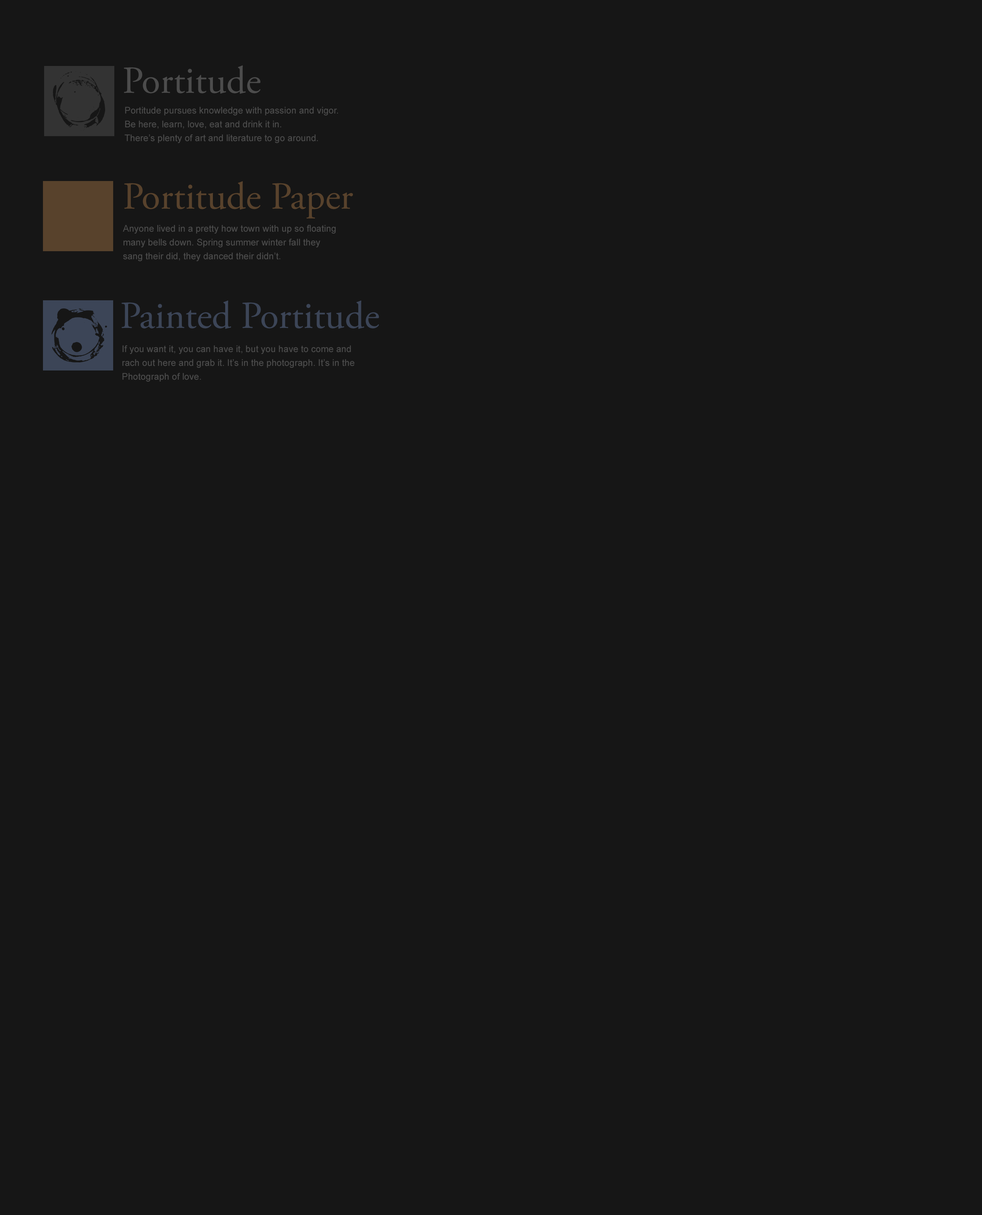
<style>
.page{position:relative;width:982px;height:1215px;background:#161616}
.page>*{position:absolute;margin:0}
.t1{font:38.3px "AGaramondPro-Regular";color:#4c4c4c}
.t2{font:9.2px/13.8px "ArialMT";color:#4c4c4c}
.t3{font:38.3px "AGaramondPro-Regular";color:#58422c}
.t4{font:38.3px "AGaramondPro-Regular";color:#3c4557}
</style>
<div class="page">
<p class="t1" style="left:124px;top:65px;width:136px;height:29px">Portitude</p>
<p class="t2" style="left:125px;top:107px;width:213px;height:36px">Portitude pursues knowledge with passion and vigor. <br>Be here, learn, love, eat and drink it in. <br>There’s plenty of art and literature to go around.</p>
<p class="t3" style="left:124px;top:181px;width:229px;height:38px">Portitude Paper</p>
<p class="t2" style="left:123px;top:225px;width:213px;height:36px">Anyone lived in a pretty how town with up so floating<br>many bells down. Spring summer winter fall they<br>sang their did, they danced their didn’t.</p>
<p class="t4" style="left:122px;top:300px;width:257px;height:29px">Painted Portitude</p>
<p class="t2" style="left:122px;top:345px;width:232px;height:37px">If you want it, you can have it, but you have to come and<br>rach out here and grab it. It’s in the photograph. It’s in the<br>Photograph of love.</p>
</div>
